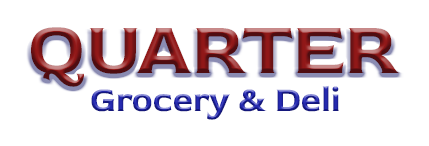
<style>
.page{position:relative;width:429px;height:146px;background:#ffffff}
.page>*{position:absolute;margin:0}
.t1{font:75px "RedRoseRoman-Bold"}
.t2{font:35.4px "RedRoseRoman-Bold"}
</style>
<div class="page">
<p class="t1" style="left:31px;top:27px;width:369px;height:60px">QUARTER</p>
<p class="t2" style="left:91px;top:85px;width:248px;height:35px">Grocery &amp; Deli</p>
</div>
